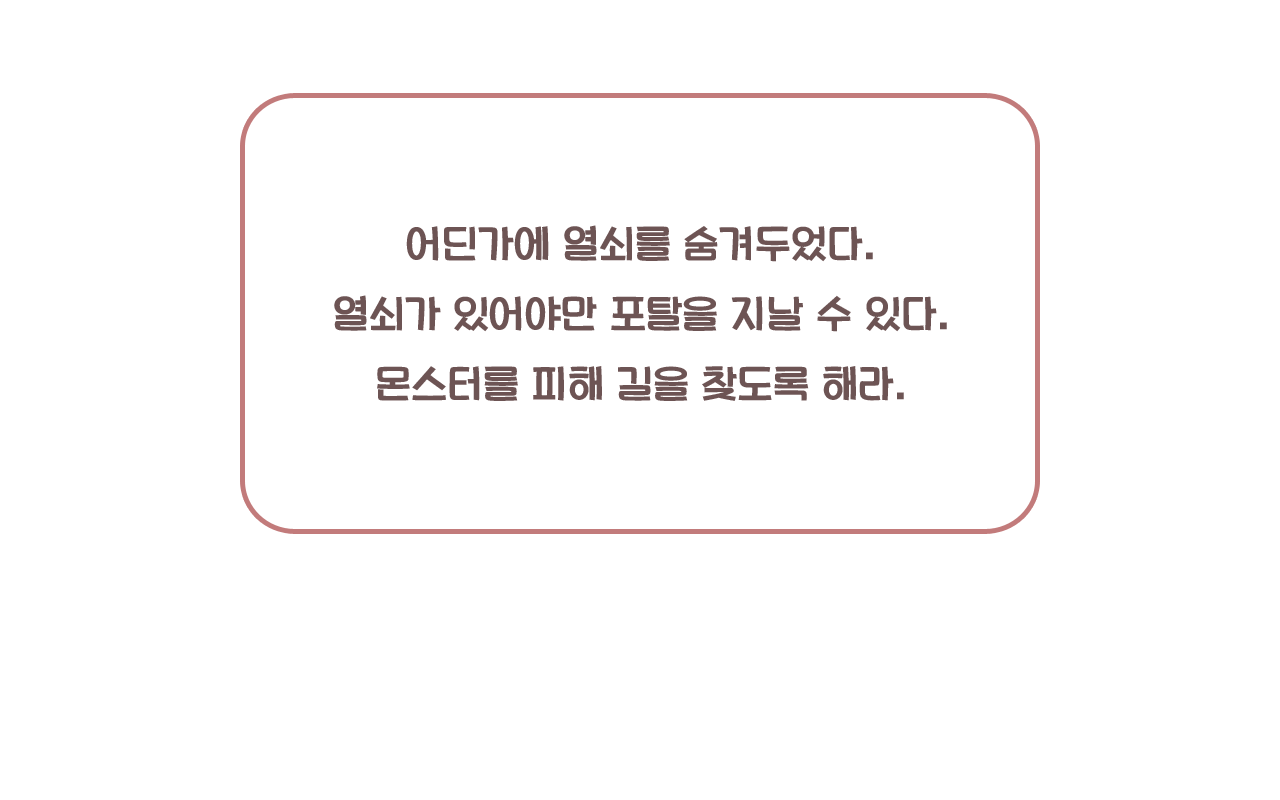
<style>
.page{position:relative;width:1280px;height:800px;background:#ffffff}
.page>*{position:absolute;margin:0}
.t1{font:40px "ImcreSoojin_Regular";color:#6d5454}
</style>
<div class="page">
<p class="t1" style="left:334px;top:225px;width:613px;height:176px;text-align:center">어딘가에 열쇠를 숨겨두었다.<br>열쇠가 있어야만 포탈을 지날 수 있다.<br>몬스터를 피해 길을 찾도록 해라.</p>
</div>
